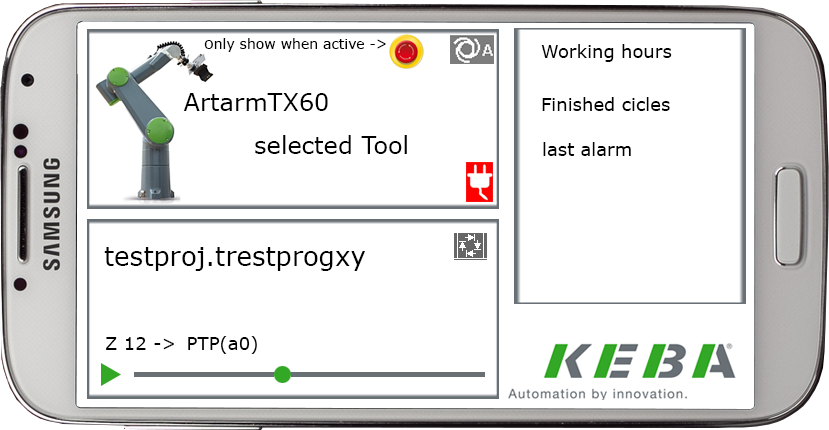
<style>
.page{position:relative;width:829px;height:430px;background:#ffffff}
.page>*{position:absolute;margin:0}
.t1{font:14px "Verdana";color:#000000}
.t2{font:16px "Verdana";color:#000000}
.t3{font:18px "Verdana";color:#000000}
.t4{font:24px "Verdana";color:#000000}
.t5{font:26px "Verdana";color:#000000}
</style>
<div class="page">
<p class="t1" style="left:204px;top:38px;width:182px;height:14px"><span class="t2">o</span>nly show when active -&gt;</p>
<p class="t3" style="left:541px;top:44px;width:131px;height:18px">Working hours</p>
<p class="t4" style="left:183px;top:93px;width:145px;height:18px">ArtarmTX60</p>
<p class="t3" style="left:542px;top:97px;width:128px;height:14px">Finished cicles</p>
<p class="t4" style="left:255px;top:135px;width:152px;height:19px">selected Tool</p>
<p class="t3" style="left:543px;top:142px;width:88px;height:14px">last alarm</p>
<p class="t5" style="left:104px;top:247px;width:261px;height:24px">testproj.trestprogxy</p>
<p class="t3" style="left:106px;top:336px;width:151px;height:18px">Z 12 -&gt; PTP(a0)</p>
</div>
